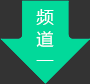
<style>
.page{position:relative;width:90px;height:84px;background:#333333}
.page>*{position:absolute;margin:0}
.t1{font:16.7px "MicrosoftYaHei";color:#ffffff}
</style>
<div class="page">
<p class="t1" style="left:36px;top:9px;width:18px;height:52px">频 道 一</p>
</div>
